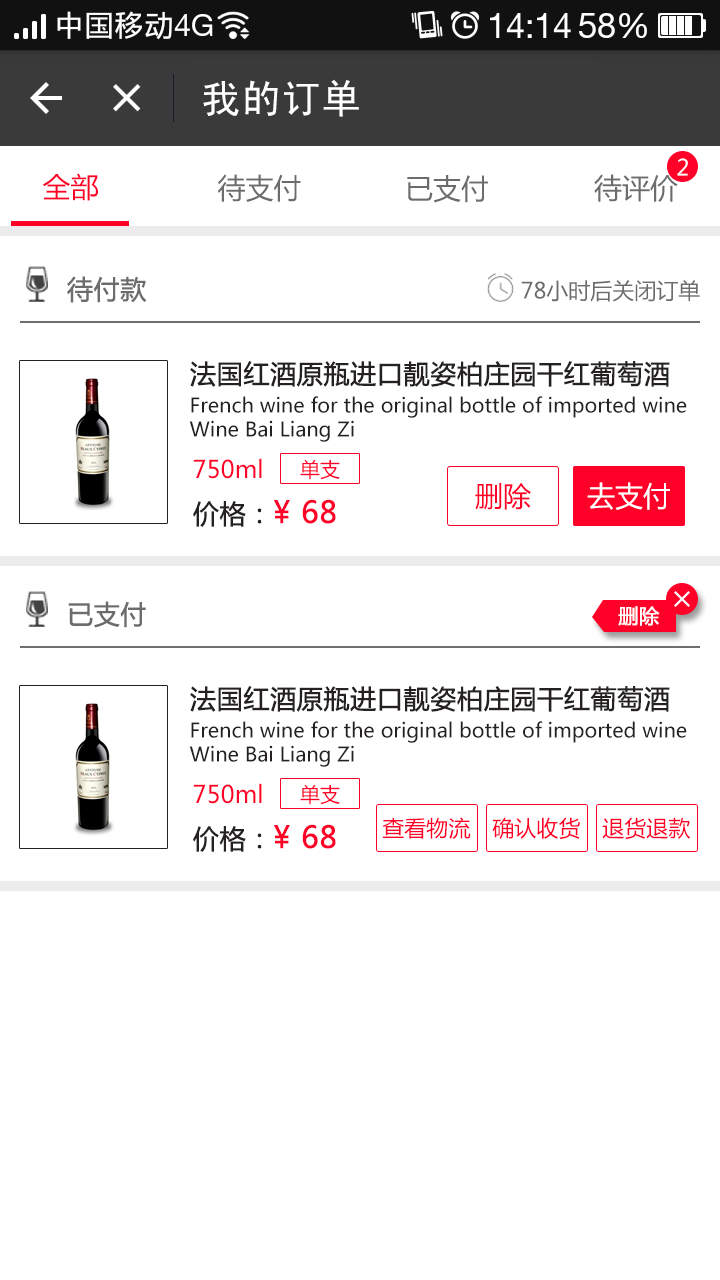
<style>
.page{position:relative;width:720px;height:1280px;background:#ffffff}
.page>*{position:absolute;margin:0}
.t1{font:40px "SimHei";color:#ffffff}
.t2{font:22px "MicrosoftYaHei";color:#ffffff}
.t3{font:28px "MicrosoftYaHei";color:#ff0029}
.t4{font:28px "MicrosoftYaHei";color:#6c6c6c}
.t5{font:26px "MicrosoftYaHei";color:#6c6c6c;font-weight:bold}
.t6{font:22px "MicrosoftYaHei";color:#6c6c6c}
.t7{font:26px "MicrosoftYaHei";color:#242120;font-weight:bold}
.t8{font:20px "MicrosoftYaHei";color:#242120}
.t9{font:24px "MicrosoftYaHei";color:#ff0029}
.t10{font:20px "MicrosoftYaHei";color:#ff0029}
.t11{font:28px "MicrosoftYaHei";color:#ffffff}
.t12{font:30px "MicrosoftYaHei";color:#ff0029;font-weight:bold}
.t13{font:20px "MicrosoftYaHei";color:#ffffff;font-weight:bold}
.t14{font:22px "MicrosoftYaHei";color:#ff0029}
</style>
<div class="page">
<p class="t1" style="left:203px;top:79px;width:156px;height:38px">我的订单</p>
<p class="t2" style="left:677px;top:158px;width:11px;height:18px">2</p>
<p class="t3" style="left:43px;top:173px;width:55px;height:28px">全部</p>
<p class="t4" style="left:218px;top:174px;width:83px;height:28px">待支付</p>
<p class="t4" style="left:594px;top:174px;width:84px;height:28px">待评价</p>
<p class="t4" style="left:407px;top:175px;width:81px;height:28px">已支付</p>
<p class="t5" style="left:67px;top:276px;width:80px;height:27px">待付款</p>
<p class="t6" style="left:521px;top:280px;width:179px;height:22px">78小时后关闭订单</p>
<p class="t7" style="left:190px;top:361px;width:480px;height:26px">法国红酒原瓶进口靓姿柏庄园干红葡萄酒</p>
<p class="t8" style="left:189px;top:396px;width:498px;height:46px">French wine for the original bottle of imported wine <br>Wine Bai Liang Zi</p>
<p class="t9" style="left:193px;top:458px;width:69px;height:21px">750ml</p>
<p class="t10" style="left:300px;top:459px;width:40px;height:21px">单支</p>
<p class="t3" style="left:475px;top:482px;width:56px;height:28px">删除</p>
<p class="t11" style="left:587px;top:482px;width:83px;height:28px">去支付</p>
<p class="t12" style="left:193px;top:499px;width:143px;height:28px"><span class="t7">价格：</span>¥ 68</p>
<p class="t5" style="left:68px;top:601px;width:78px;height:27px">已支付</p>
<p class="t13" style="left:618px;top:606px;width:42px;height:20px">删除</p>
<p class="t7" style="left:190px;top:686px;width:480px;height:26px">法国红酒原瓶进口靓姿柏庄园干红葡萄酒</p>
<p class="t8" style="left:189px;top:721px;width:498px;height:46px">French wine for the original bottle of imported wine <br>Wine Bai Liang Zi</p>
<p class="t9" style="left:193px;top:783px;width:69px;height:21px">750ml</p>
<p class="t10" style="left:300px;top:784px;width:40px;height:21px">单支</p>
<p class="t14" style="left:382px;top:817px;width:89px;height:22px">查看物流</p>
<p class="t14" style="left:492px;top:817px;width:88px;height:22px">确认收货</p>
<p class="t14" style="left:602px;top:817px;width:88px;height:22px">退货退款</p>
<p class="t12" style="left:193px;top:824px;width:143px;height:28px"><span class="t7">价格：</span>¥ 68</p>
</div>
